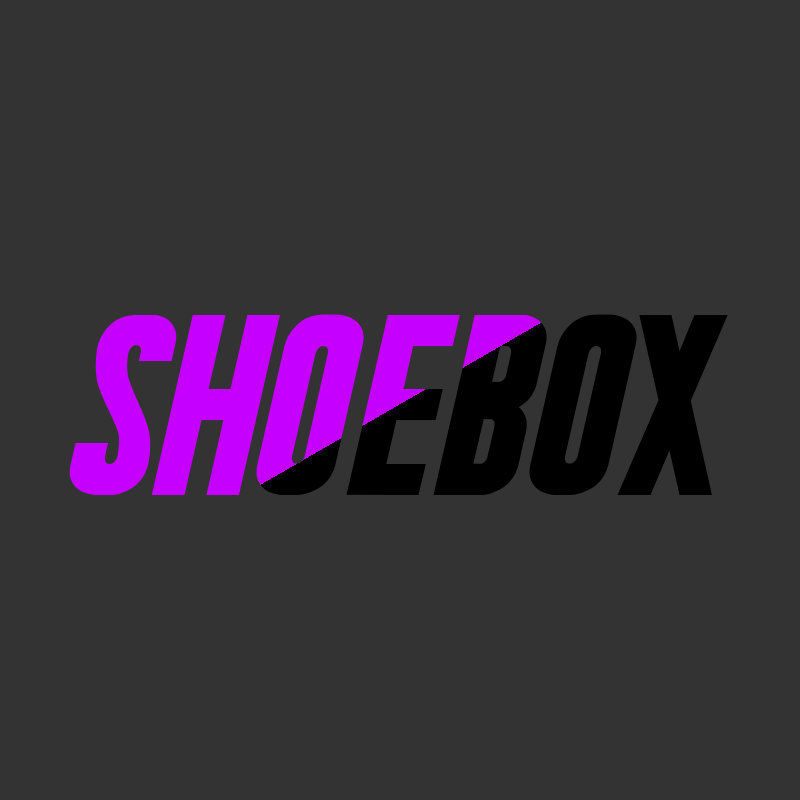
<style>
.page{position:relative;width:800px;height:800px;background:#333333}
.page>*{position:absolute;margin:0}
.t1{font:253.3px "UraeNium"}
</style>
<div class="page">
<p class="t1" style="left:69px;top:314px;width:659px;height:181px">Shoebox</p>
</div>
